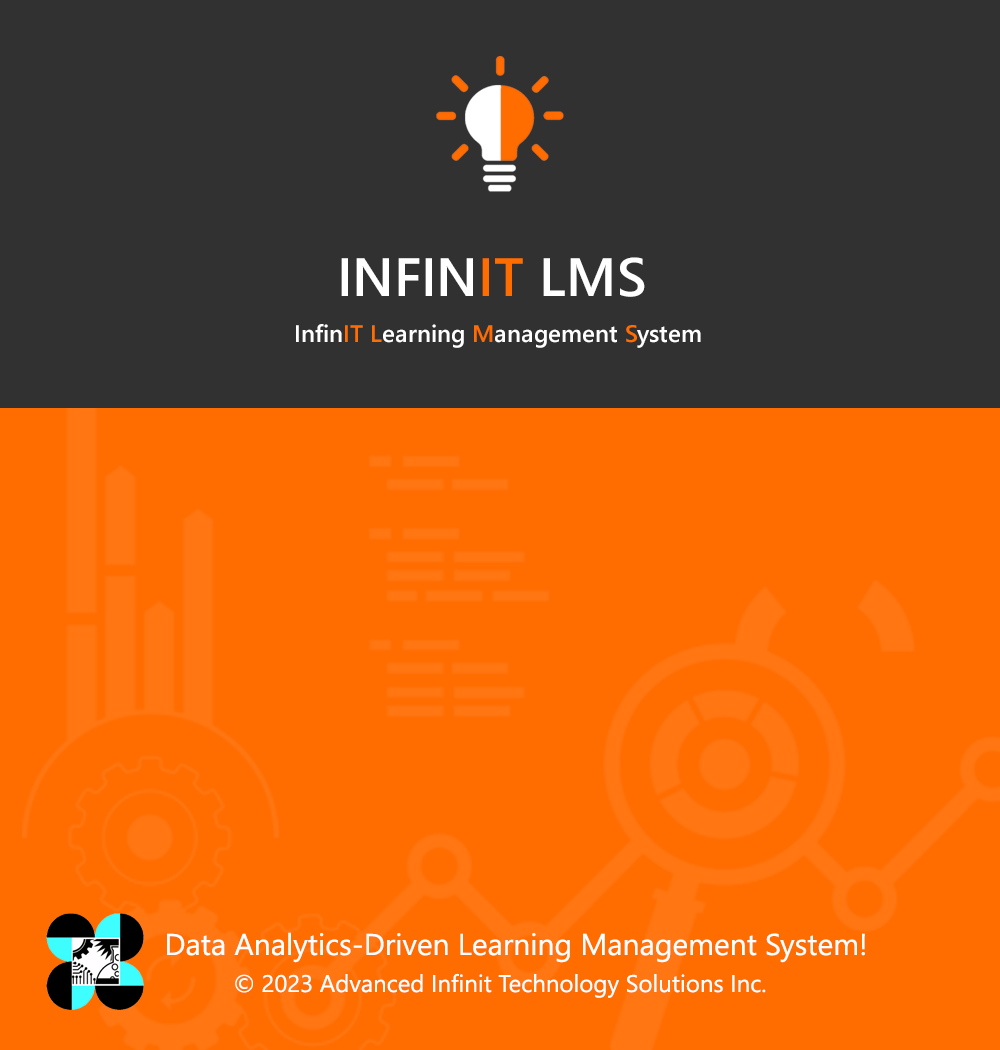
<style>
.page{position:relative;width:1000px;height:1050px;background:#ff6c00}
.page>*{position:absolute;margin:0}
.t1{font:54px "SegoeUI-Semibold";color:#ffffff}
.t2{font:54px "SegoeUI-Semibold";color:#ff6c00}
.t3{font:24px "SegoeUI-Semibold";color:#ffffff}
.t4{font:24px "SegoeUI-Semibold";color:#ff6c00}
.t5{font:30px "SegoeUI";color:#ffffff}
.t6{font:24px "SegoeUI";color:#ffffff}
</style>
<div class="page">
<p class="t1" style="left:341px;top:257px;width:304px;height:40px">INFIN<span class="t2">IT</span> LMS</p>
<p class="t3" style="left:296px;top:324px;width:405px;height:24px">Infin<span class="t4">IT L</span>earning <span class="t4">M</span>anagement <span class="t4">S</span>ystem</p>
<p class="t5" style="left:167px;top:932px;width:698px;height:31px">Data Analytics-Driven Learning Management System!</p>
<p class="t6" style="left:235px;top:973px;width:531px;height:25px">© 2023 Advanced Infinit Technology Solutions Inc.</p>
</div>
